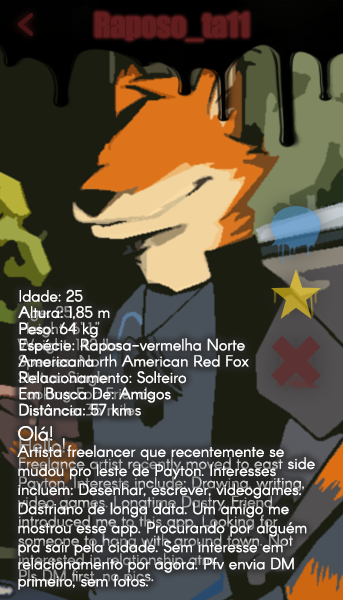
<style>
.page{position:relative;width:343px;height:600px}
.page>*{position:absolute;margin:0}
.t1{font:31px "Impact";letter-spacing:-0.015em;color:#621e1e}
.t2{font:16px "Arcon-Regular";color:#ffffff}
.t3{font:16px/22px "Arcon-Regular";color:#ffffff}
.t4{font:20px "Arcon-Regular";color:#ffffff}
.t5{font:16px/20px "Arcon-Regular";color:#ffffff}
</style>
<div class="page">
<p class="t1" style="left:95px;top:12px;width:154px;height:29px">Raposo_ta11</p>
<p class="t2" style="left:18px;top:289px;width:227px;height:127px">Idade: 25<br>Altura: 1,85 m<br>Peso: 64 kg<br>Espécie: Raposa-vermelha Norte<br>Americana<br>Relacionamento: Solteiro<br>Em Busca De: Amigos<br>Distância: 57 km</p>
<p class="t3" style="left:17px;top:426px;width:290px;height:164px"><span class="t4">Olá!<br></span><span class="t2">Artista freelancer que recentemente se<br></span>mudou pro leste de Payton. Interesses<br>incluem: Desenhar, escrever, videogames.<br>Dastriano de longa data. Um amigo me<br>mostrou esse app. Procurando por alguém<br>pra sair pela cidade. Sem interesse em<br><span class="t5">relacionamento por agora. Pfv envia DM<br>primeiro, sem fotos.</span></p>
</div>
